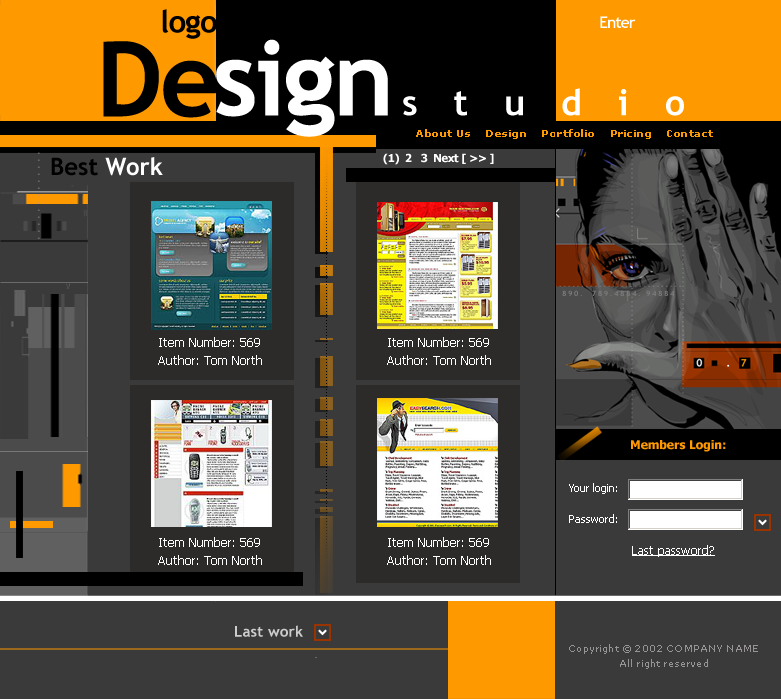
<style>
.page{position:relative;width:781px;height:699px;background:#3a3a3a}
.page>*{position:absolute;margin:0}
.t1{font:31.1px "TrebuchetMS-Bold";letter-spacing:-0.025em;color:#000000}
.t2{font:16.2px "TrebuchetMS-Bold";letter-spacing:-0.075em;color:#ffffff}
.t3{font:104px "TrebuchetMS-Bold";letter-spacing:-0.025em;color:#000000}
.t4{font:104px "TrebuchetMS-Bold";letter-spacing:-0.025em;color:#ffffff}
.t5{font:36px "TrebuchetMS-Bold";letter-spacing:1em;color:#ffffff}
.t6{font:10px "Verdana-Bold";letter-spacing:0.05em;color:#ff9900}
.t7{font:14px "TrebuchetMS-Bold";letter-spacing:1em;scale:0.37 1}
.t8{font:24px "TrebuchetMS-Bold";color:#000000}
.t9{font:24px "TrebuchetMS-Bold";color:#ffffff}
.t10{font:11px "Tahoma-Bold";letter-spacing:-0.025em;color:#ffffff}
.t11{font:7.6px "TrebuchetMS-Bold";letter-spacing:0.2em;color:#7c7c7c}
.t12{font:12px "Tahoma";color:#ffffff}
.t13{font:12px "Tahoma-Bold";color:#ff9900}
.t14{font:11px "Tahoma";color:#ffffff}
.t15{font:12px "Tahoma";color:#ffffff;text-decoration:underline}
.t16{font:15px "TrebuchetMS-Bold";letter-spacing:0.01em;color:#cccccc}
.t17{font:9px/15px "Verdana";letter-spacing:0.02em;color:#969494}
</style>
<div class="page">
<p class="t1" style="left:162px;top:9px;width:55px;height:30px">logo</p>
<p class="t2" style="left:600px;top:16px;width:36px;height:12px">Enter</p>
<p class="t3" style="left:103px;top:41px;width:114px;height:77px">De</p>
<p class="t4" style="left:216px;top:39px;width:172px;height:98px">sign</p>
<p class="t5" style="left:403px;top:88px;width:281px;height:28px">studio</p>
<p class="t6" style="left:416px;top:129px;width:297px;height:10px">About Us    Design    Portfolio    Pricing    Contact</p>
<p class="t7" style="left:37px;top:152px;width:3px;height:87px;rotate:-90deg">.............</p>
<p class="t8" style="left:51px;top:157px;width:112px;height:19px">Best <span class="t9">Work</span></p>
<p class="t10" style="left:383px;top:153px;width:111px;height:12px">(1)  2   3  Next [ &gt;&gt; ]</p>
<p class="t11" style="left:562px;top:290px;width:113px;height:6px">890.  789.4884. 94884</p>
<p class="t12" style="left:159px;top:337px;width:101px;height:10px">Item Number: 569</p>
<p class="t12" style="left:388px;top:337px;width:101px;height:10px">Item Number: 569</p>
<p class="t12" style="left:158px;top:355px;width:104px;height:10px">Author: Tom North</p>
<p class="t12" style="left:387px;top:355px;width:104px;height:10px">Author: Tom North</p>
<p class="t13" style="left:631px;top:440px;width:95px;height:12px">Members Login:</p>
<p class="t14" style="left:569px;top:483px;width:48px;height:11px">Your login:</p>
<p class="t14" style="left:569px;top:514px;width:48px;height:9px">Password:</p>
<p class="t12" style="left:159px;top:537px;width:101px;height:10px">Item Number: 569</p>
<p class="t12" style="left:388px;top:537px;width:101px;height:10px">Item Number: 569</p>
<p class="t15" style="left:632px;top:545px;width:83px;height:12px">Last password?</p>
<p class="t12" style="left:158px;top:555px;width:104px;height:10px">Author: Tom North</p>
<p class="t12" style="left:387px;top:555px;width:104px;height:10px">Author: Tom North</p>
<p class="t16" style="left:235px;top:625px;width:68px;height:12px">Last work</p>
<p class="t17" style="left:569px;top:644px;width:189px;height:25px;text-align:center">Copyright © 2002 COMPANY NAME<br>All right reserved</p>
</div>
